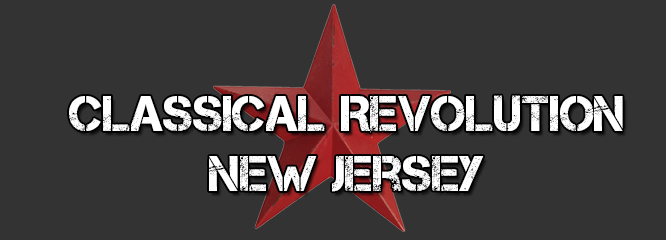
<style>
.page{position:relative;width:666px;height:240px;background:#333333}
.page>*{position:absolute;margin:0}
.t1{font:50px "Captureit";color:#ffffff}
.t2{font:90px "Captureit";color:#ffffff}
</style>
<div class="page">
<p class="t1" style="left:69px;top:95px;width:554px;height:97px;text-align:center"><span class="t2"><br></span>classical Revolution <br>New Jersey</p>
</div>
